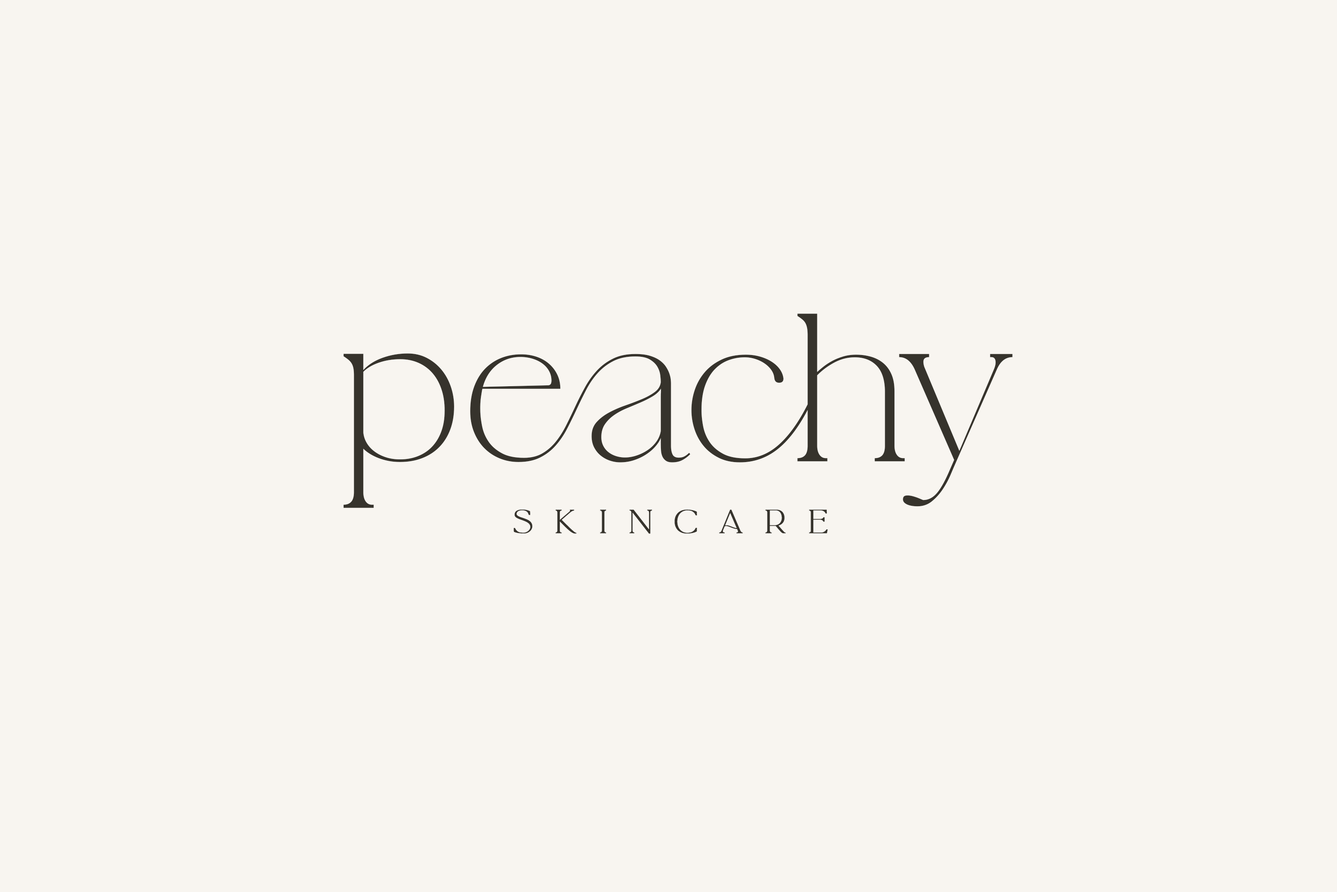
<style>
.page{position:relative;width:1337px;height:892px;background:#f8f5f0}
.page>*{position:absolute;margin:0}
.t1{font:172.8px "LaLuxesSerif";color:#36332c}
.t2{font:172.8px "LaLuxesSerif";letter-spacing:-0.02em;color:#36332c}
.t3{font:172.8px "LaLuxesSerif";letter-spacing:-0.04em;color:#36332c}
.t4{font:29.1px "LaLuxesSerif";letter-spacing:0.7em;color:#36332c;text-transform:uppercase;font-weight:bold}
</style>
<div class="page">
<p class="t1" style="left:343px;top:313px;width:670px;height:195px">pe<span class="t2">a</span>c<span class="t3">h</span>y</p>
<p class="t4" style="left:514px;top:509px;width:314px;height:25px">SKINCARE</p>
</div>
